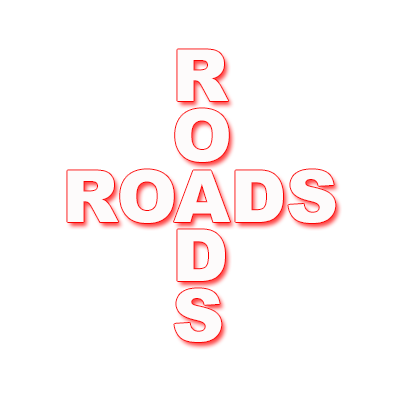
<style>
.page{position:relative;width:400px;height:400px;background:#ffffff}
.page>*{position:absolute;margin:0}
.t1{font:72px/60px "Arial-Black";color:#fdfbfb}
.t2{font:72px "Arial-Black";color:#fdfbfb}
</style>
<div class="page">
<p class="t1" style="left:174px;top:49px;width:55px;height:293px">R<br>O<br><br>D<br>S</p>
<p class="t2" style="left:67px;top:169px;width:269px;height:54px">ROADS</p>
</div>
